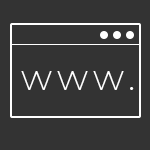
<style>
.page{position:relative;width:150px;height:150px;background:#333333}
.page>*{position:absolute;margin:0}
.t1{font:36px "Montserrat-Light";letter-spacing:0.14em;color:#ffffff}
</style>
<div class="page">
<p class="t1" style="left:21px;top:71px;width:113px;height:19px">www.</p>
</div>
